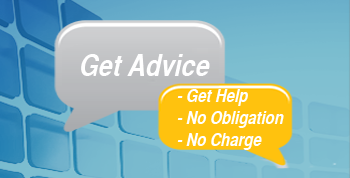
<style>
.page{position:relative;width:350px;height:178px}
.page>*{position:absolute;margin:0}
.t1{font:30.2px "HelveticaCYBoldOblique";color:#ffffff}
.t2{font:18.1px "HelveticaCYBoldOblique";color:#ffffff}
</style>
<div class="page">
<p class="t1" style="left:81px;top:54px;width:129px;height:22px">Get Advice</p>
<p class="t2" style="left:177px;top:89px;width:107px;height:61px">- Get Help<br>- No Obligation<br>- No Charge</p>
</div>
